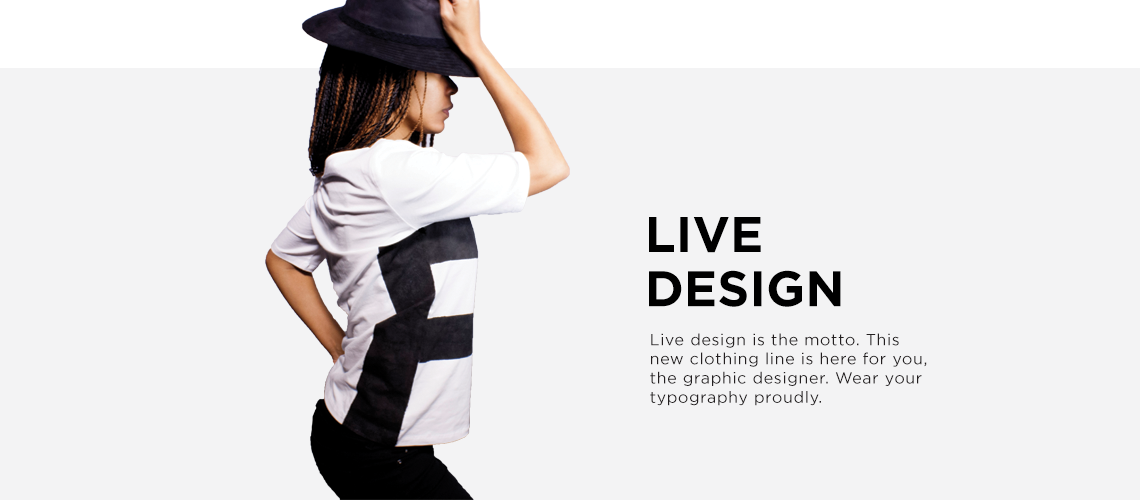
<style>
.page{position:relative;width:1140px;height:500px;background:#f3f3f4}
.page>*{position:absolute;margin:0}
.t1{font:50px/54.2px "Gotham-Bold";color:#000000;text-transform:uppercase}
.t2{font:16px "Gotham-Book";letter-spacing:0.04em;color:#231f20}
</style>
<div class="page">
<p class="t1" style="left:649px;top:217px;width:192px;height:90px">LIVE <br>DESIGN</p>
<p class="t2" style="left:650px;top:333px;width:277px;height:73px">Live design is the motto. This <br>new clothing line is here for you, <br>the graphic designer. Wear your <br>typography proudly.</p>
</div>
